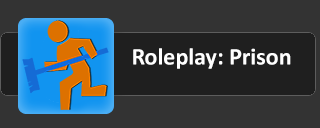
<style>
.page{position:relative;width:320px;height:128px;background:#333333}
.page>*{position:absolute;margin:0}
.t1{font:24px "Calibri-Bold";color:#ffffff}
</style>
<div class="page">
<p class="t1" style="left:133px;top:48px;width:158px;height:21px">Roleplay: Prison</p>
</div>
